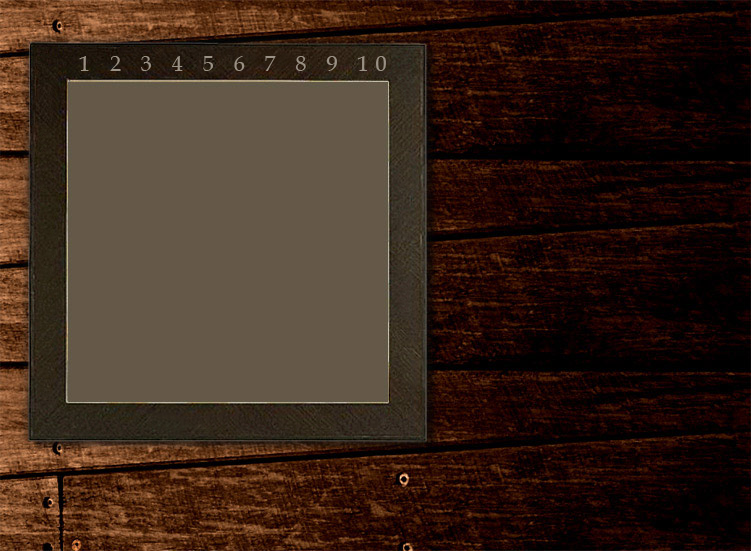
<style>
.page{position:relative;width:751px;height:551px;background:#655848}
.page>*{position:absolute;margin:0}
.t1{font:22px "BookAntiqua";letter-spacing:0.328em;color:#9a9185}
</style>
<div class="page">
<p class="t1" style="left:79px;top:56px;width:307px;height:15px">1 2 3 4 5 6 7 8 9 10</p>
</div>
